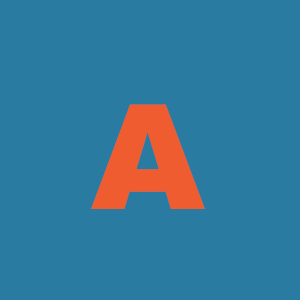
<style>
.page{position:relative;width:300px;height:300px;background:#2a7ba1}
.page>*{position:absolute;margin:0}
.t1{font:146px "Arial-Black";letter-spacing:0.1em;color:#ee5c30}
</style>
<div class="page">
<p class="t1" style="left:91px;top:104px;width:114px;height:105px">A</p>
</div>
